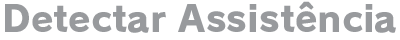
<style>
.page{position:relative;width:400px;height:40px;background:#ffffff}
.page>*{position:absolute;margin:0}
.t1{font:36px "RodinPro-EB";letter-spacing:0.003em;color:#989a9d}
</style>
<div class="page">
<p class="t1" style="left:5px;top:1px;width:391px;height:32px">Detectar Assistência</p>
</div>
